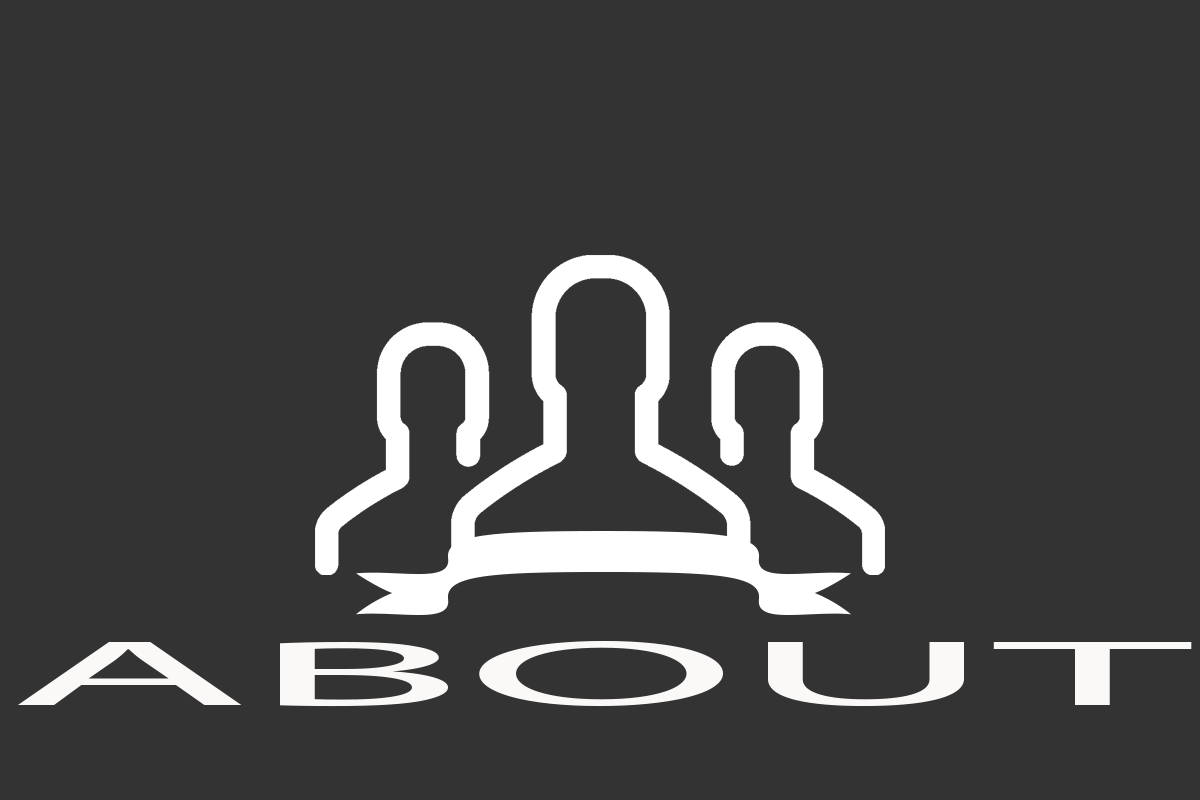
<style>
.page{position:relative;width:1200px;height:800px;background:#333333}
.page>*{position:absolute;margin:0}
.t1{font:93.8px "MyriadHebrew-Regular";color:#fbf8f8;scale:4.22 1}
</style>
<div class="page">
<p class="t1" style="left:18px;top:640px;width:1174px;height:67px">ABOUT</p>
</div>
